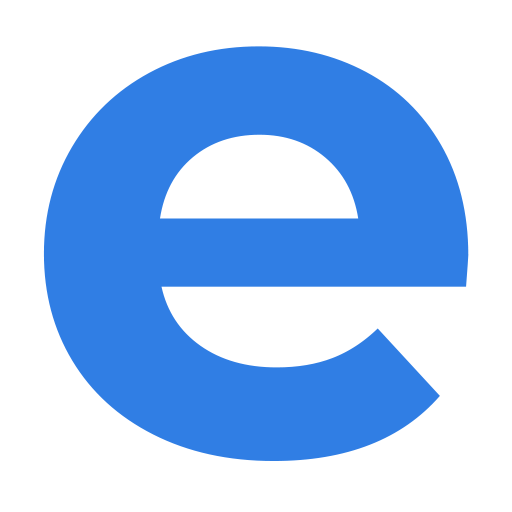
<style>
.page{position:relative;width:512px;height:512px;background:#ffffff}
.page>*{position:absolute;margin:0}
.t1{font:748.4px "Montserrat-Bold";color:#307ee4}
</style>
<div class="page">
<p class="t1" style="left:43px;top:46px;width:426px;height:415px">e</p>
</div>
